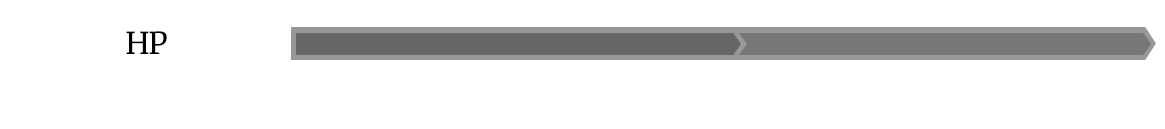
<style>
.page{position:relative;width:1165px;height:129px;background:#ffffff}
.page>*{position:absolute;margin:0}
.t1{font:30px "Merriweather-Regular";letter-spacing:-0.06em;color:#000000}
</style>
<div class="page">
<p class="t1" style="left:126px;top:31px;width:41px;height:23px">HP</p>
</div>
